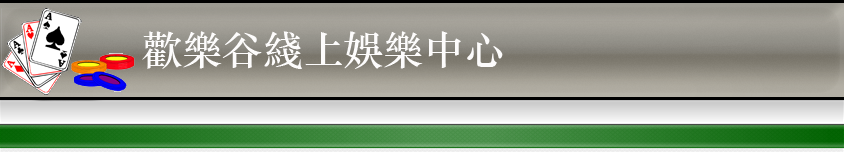
<style>
.page{position:relative;width:844px;height:152px}
.page>*{position:absolute;margin:0}
.t1{font:40.2px "STZhongsong";color:#fdfcfc}
</style>
<div class="page">
<p class="t1" style="left:142px;top:31px;width:361px;height:38px">歡樂谷綫上娛樂中心</p>
</div>
